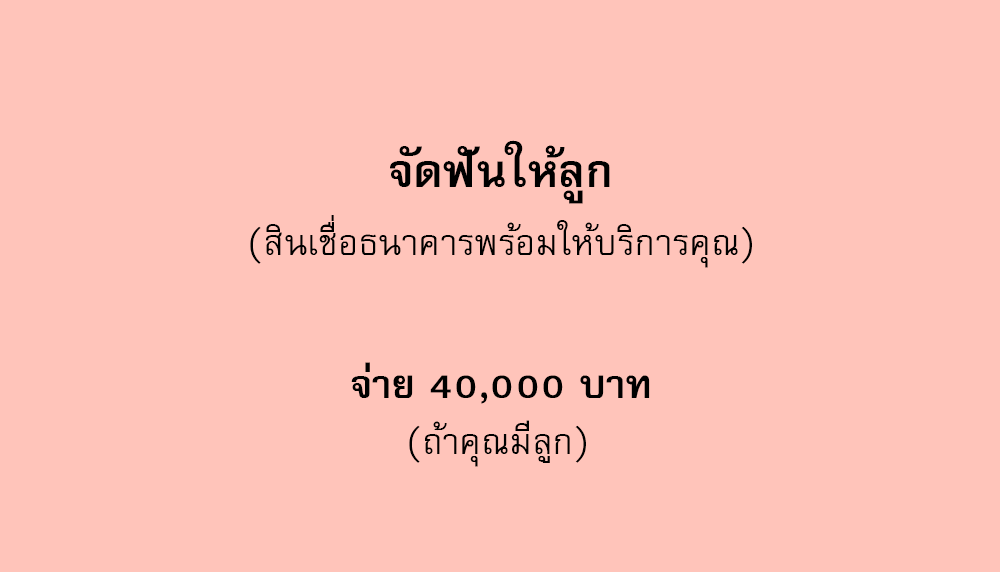
<style>
.page{position:relative;width:1000px;height:572px;background:#ffc4ba}
.page>*{position:absolute;margin:0}
.t1{font:64px "FreesiaUPCBold";color:#000000}
.t2{font:50px "FreesiaUPC";color:#000000}
.t3{font:56px "FreesiaUPCBold";color:#000000}
</style>
<div class="page">
<p class="t1" style="left:390px;top:140px;width:220px;height:64px">จัดฟันให้ลูก</p>
<p class="t2" style="left:250px;top:215px;width:502px;height:53px">(สินเชื่อธนาคารพร้อมให้บริการคุณ)</p>
<p class="t3" style="left:351px;top:362px;width:299px;height:42px">จ่าย 40,000 บาท</p>
<p class="t2" style="left:409px;top:420px;width:177px;height:47px">(ถ้าคุณมีลูก)</p>
</div>
